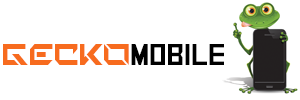
<style>
.page{position:relative;width:300px;height:100px;background:#ffffff}
.page>*{position:absolute;margin:0}
.t1{font:41.7px "TechnoHideo";color:#f76b1e;scale:0.86 1}
.t2{font:30px "SquareFont";color:#000000}
</style>
<div class="page">
<p class="t1" style="left:3px;top:44px;width:126px;height:21px">GECKO</p>
<p class="t2" style="left:131px;top:44px;width:93px;height:21px">MOBILE</p>
</div>
